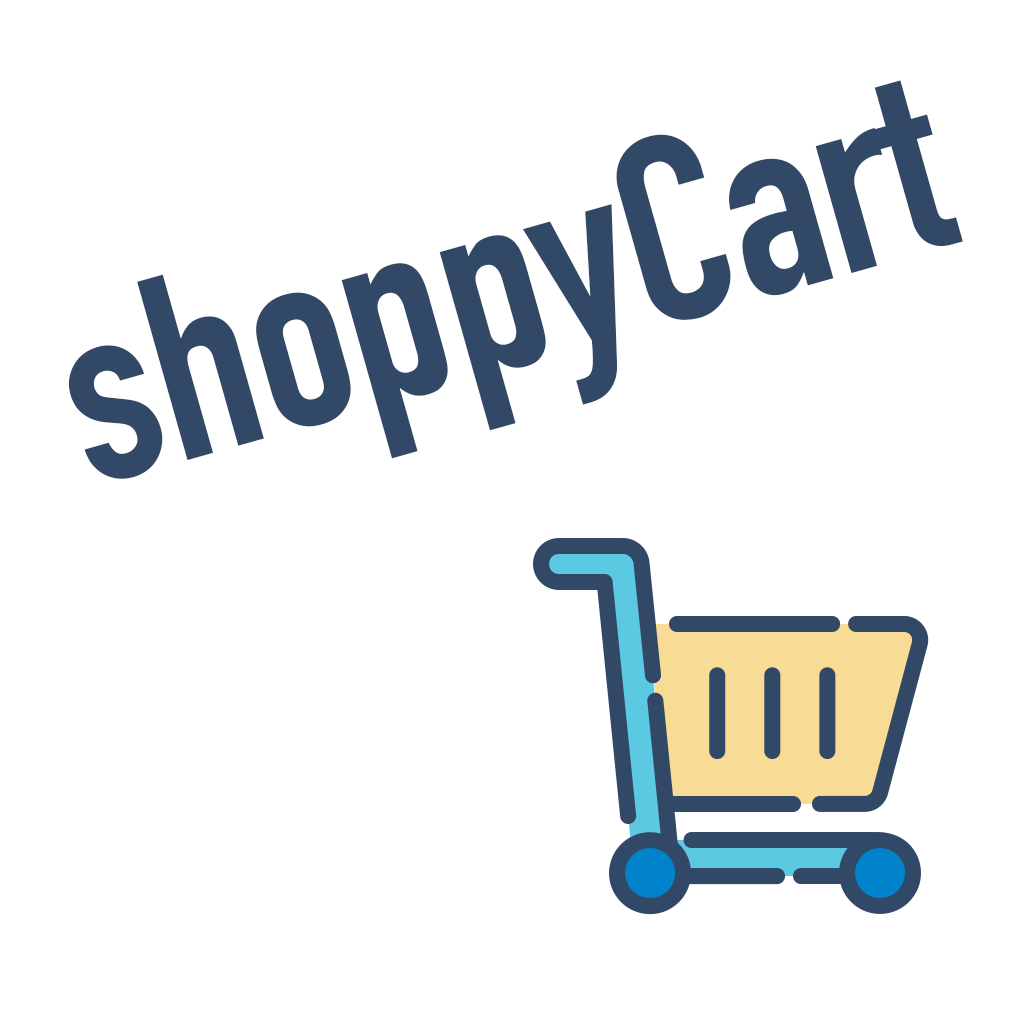
<style>
.page{position:relative;width:1024px;height:1024px;background:#ffffff}
.page>*{position:absolute;margin:0}
.t1{font:260px "DINCondensed-Bold";color:#314967}
</style>
<div class="page">
<p class="t1" style="left:68px;top:80px;width:895px;height:399px;rotate:-16deg">shoppyCart</p>
</div>
